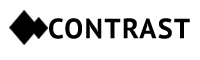
<style>
.page{position:relative;width:200px;height:60px;background:#ffffff}
.page>*{position:absolute;margin:0}
.t1{font:28px "PTSans-Bold";letter-spacing:0.05em;color:#000000;text-transform:uppercase}
</style>
<div class="page">
<p class="t1" style="left:49px;top:18px;width:141px;height:21px">Contrast</p>
</div>
